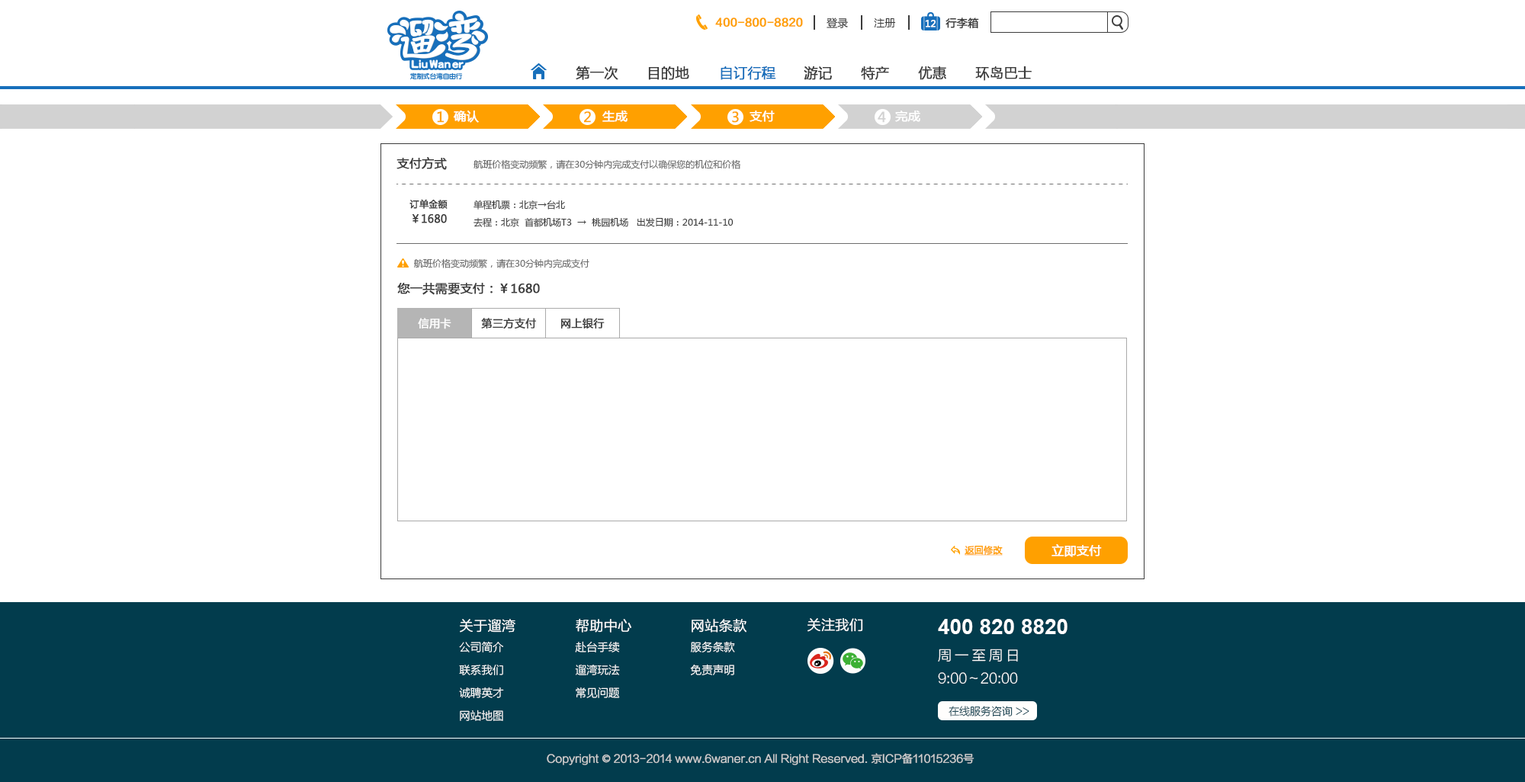
<style>
.page{position:relative;width:1525px;height:782px;background:#ffffff}
.page>*{position:absolute;margin:0}
.t1{font:10.7px "FZLTZHK--GBK1-0";color:#ffa000;font-weight:bold}
.t2{font:10.7px "MicrosoftYaHei";color:#3c3c3c}
.t3{font:10.7px "MicrosoftYaHei";color:#3c3c3c;font-weight:bold}
.t4{font:9.1px "MicrosoftYaHei";color:#fefefe;font-weight:bold}
.t5{font:13.7px "MicrosoftYaHei";color:#3c3c3c;font-weight:bold}
.t6{font:13.7px "MicrosoftYaHei";color:#176fbb;font-weight:bold}
.t7{font:13.7px "MicrosoftYaHei";color:#ffa000;font-weight:bold}
.t8{font:12.2px "MicrosoftYaHei";color:#ffffff;font-weight:bold}
.t9{font:13.7px "MicrosoftYaHei";color:#d2d2d2;font-weight:bold}
.t10{font:12.2px "MicrosoftYaHei";color:#3c3c3c;font-weight:bold}
.t11{font:9.1px "MicrosoftYaHei";color:#6e6e6e}
.t12{font:10.7px/13.7px "MicrosoftYaHei";color:#3c3c3c;font-weight:bold}
.t13{font:9.1px/13.7px "MicrosoftYaHei";color:#3c3c3c;font-weight:bold}
.t14{font:9.1px "MicrosoftYaHei";color:#3c3c3c}
.t15{font:10.7px "MicrosoftYaHei";color:#ffffff;font-weight:bold}
.t16{font:9.1px "MicrosoftYaHei";color:#ffa000;font-weight:bold;text-decoration:underline}
.t17{font:11.1px/22.9px "FZLTXHK--GBK1-0";color:#ffffff}
.t18{font:13.7px/22.9px "FZLTXHK--GBK1-0";color:#ffffff;font-weight:bold}
.t19{font:13.7px "FZLTXHK--GBK1-0";color:#ffffff;font-weight:bold}
.t20{font:21.3px "Arial-BoldMT";color:#ffffff}
.t21{font:13.7px/22.9px "FZLTXHK--GBK1-0";color:#ffffff}
.t22{font:13.7px/22.9px "FZLTXHK--GBK1-0";letter-spacing:0.24em;color:#ffffff}
.t23{font:10.7px "FZLTXHK--GBK1-0"}
.t24{font:10.7px "FZLTXHK--GBK1-0";color:#d0d0d0;font-weight:bold}
.t25{font:10.7px "AdobeHeitiStd-Regular";color:#d0d0d0;font-weight:bold}
</style>
<div class="page">
<p class="t1" style="left:715px;top:18px;width:88px;height:9px">400-800-8820</p>
<p class="t2" style="left:826px;top:18px;width:22px;height:10px">登录</p>
<p class="t3" style="left:945px;top:18px;width:34px;height:11px">行李箱</p>
<p class="t2" style="left:874px;top:18px;width:22px;height:9px">注册</p>
<p class="t4" style="left:925px;top:20px;width:10px;height:7px">12</p>
<p class="t5" style="left:576px;top:66px;width:42px;height:14px">第一次</p>
<p class="t5" style="left:648px;top:66px;width:41px;height:14px">目的地</p>
<p class="t6" style="left:720px;top:66px;width:56px;height:14px">自订行程</p>
<p class="t5" style="left:803px;top:66px;width:29px;height:14px">游记</p>
<p class="t5" style="left:861px;top:66px;width:28px;height:14px">特产</p>
<p class="t5" style="left:918px;top:66px;width:28px;height:14px">优惠</p>
<p class="t5" style="left:975px;top:66px;width:56px;height:15px">环岛巴士</p>
<p class="t7" style="left:437px;top:111px;width:7px;height:12px">1</p>
<p class="t8" style="left:453px;top:111px;width:26px;height:12px">确认</p>
<p class="t7" style="left:584px;top:111px;width:7px;height:12px">2</p>
<p class="t8" style="left:602px;top:111px;width:25px;height:11px">生成</p>
<p class="t7" style="left:732px;top:111px;width:7px;height:12px">3</p>
<p class="t8" style="left:749px;top:111px;width:26px;height:11px">支付</p>
<p class="t9" style="left:877px;top:111px;width:9px;height:12px">4</p>
<p class="t8" style="left:895px;top:111px;width:25px;height:11px">完成</p>
<p class="t10" style="left:396px;top:157px;width:51px;height:13px">支付方式</p>
<p class="t11" style="left:473px;top:159px;width:267px;height:10px">航班价格变动频繁，请在30分钟内完成支付以确保您的机位和价格</p>
<p class="t12" style="left:409px;top:199px;width:38px;height:24px;text-align:center"><span class="t13">订单金额<br></span>￥1680</p>
<p class="t14" style="left:473px;top:200px;width:92px;height:10px">单程机票：北京→台北</p>
<p class="t14" style="left:473px;top:217px;width:260px;height:10px">去程：北京  首都机场T3  →  桃园机场   出发日期：2014-11-10</p>
<p class="t11" style="left:414px;top:258px;width:175px;height:10px">航班价格变动频繁，请在30分钟内完成支付</p>
<p class="t10" style="left:397px;top:283px;width:143px;height:12px">您一共需要支付：￥1680</p>
<p class="t15" style="left:418px;top:318px;width:33px;height:11px">信用卡</p>
<p class="t3" style="left:481px;top:318px;width:55px;height:11px">第三方支付</p>
<p class="t3" style="left:560px;top:318px;width:45px;height:11px">网上银行</p>
<p class="t16" style="left:964px;top:545px;width:38px;height:11px">返回修改</p>
<p class="t8" style="left:1051px;top:544px;width:51px;height:13px">立即支付</p>
<p class="t17" style="left:459px;top:619px;width:56px;height:102px"><span class="t18">关于遛湾<br></span>公司简介<br>联系我们<br>诚聘英才<br>网站地图</p>
<p class="t17" style="left:575px;top:618px;width:56px;height:80px"><span class="t18">帮助中心<br></span>赴台手续 <br>遛湾玩法 <br>常见问题</p>
<p class="t17" style="left:690px;top:619px;width:56px;height:56px"><span class="t18">网站条款 <br></span>服务条款<br>免责声明</p>
<p class="t19" style="left:807px;top:618px;width:56px;height:14px">关注我们</p>
<p class="t20" style="left:938px;top:619px;width:129px;height:15px">400 820 8820</p>
<p class="t21" style="left:938px;top:649px;width:80px;height:35px"><span class="t22">周一至周日<br></span>9:00～20:00</p>
<p class="t23" style="left:948px;top:706px;width:81px;height:11px">在线服务咨询 &gt;&gt;</p>
<p class="t24" style="left:547px;top:753px;width:427px;height:12px">Copyright <span class="t25">©</span> 2013-2014 www.6waner.cn All Right Reserved. 京ICP备11015236号</p>
</div>
